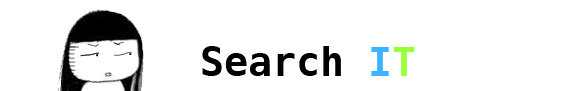
<style>
.page{position:relative;width:567px;height:91px;background:#ffffff}
.page>*{position:absolute;margin:0}
.t1{font:40px "Menlo-Bold";color:#000000}
.t2{font:40px "Menlo-Bold";color:#3bb3ff}
.t3{font:40px "Menlo-Bold";color:#97ff3b}
</style>
<div class="page">
<p class="t1" style="left:202px;top:46px;width:213px;height:30px">Search <span class="t2">I</span><span class="t3">T</span></p>
</div>
